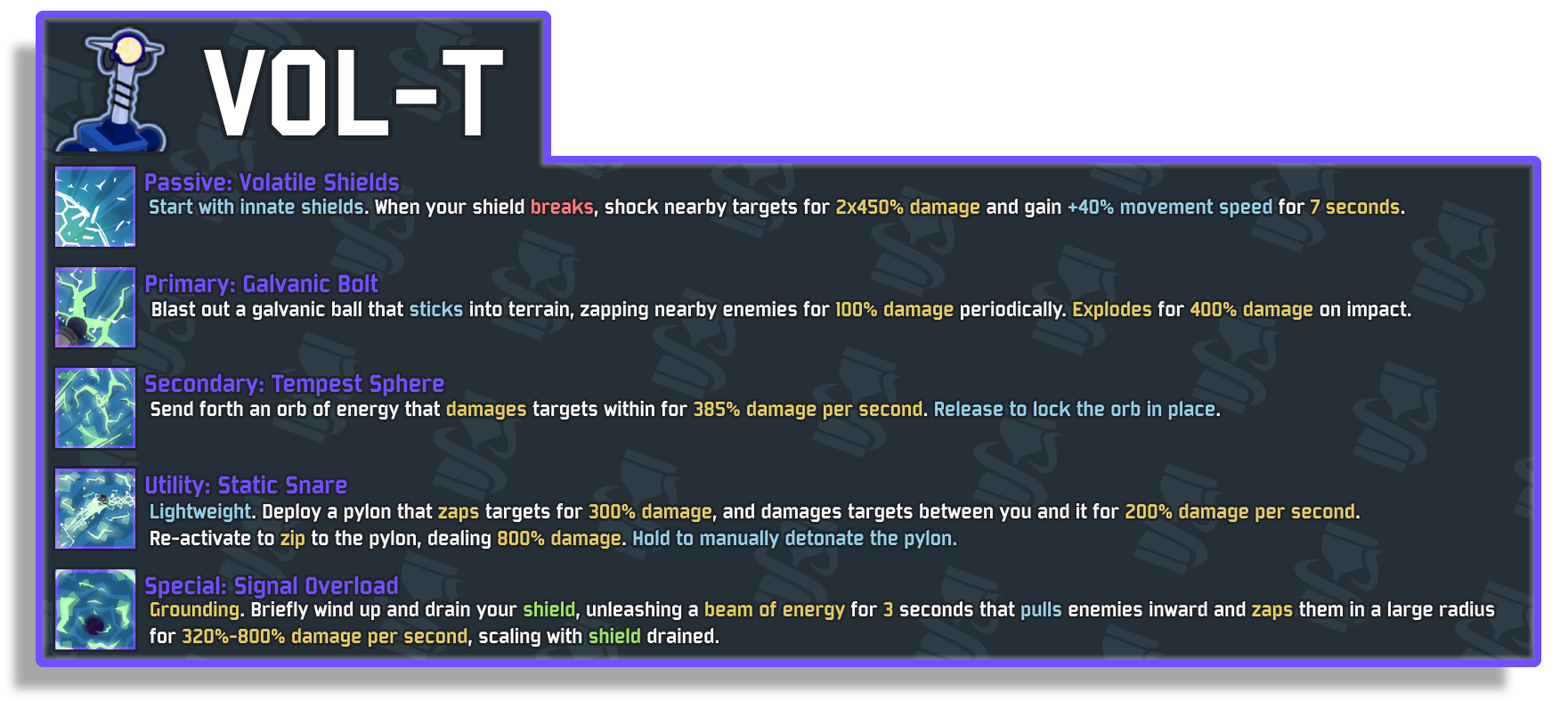
<style>
.page{position:relative;width:1568px;height:701px;background:#252f38}
.page>*{position:absolute;margin:0}
.t1{font:133.6px "Bombardier";color:#ffffff}
.t2{font:26.7px "Bombardier";color:#714fff}
.t3{font:22.3px "Bombardier";color:#f7f7f7}
.t4{font:22.3px "Bombardier";color:#95cde5}
.t5{font:22.3px "Bombardier";color:#fe7c7c}
.t6{font:22.3px "Bombardier";color:#e5c962}
.t7{font:22.3px "Bombardier";color:#9ce562}
</style>
<div class="page">
<p class="t1" style="left:204px;top:50px;width:299px;height:85px">VOL-T</p>
<p class="t2" style="left:145px;top:172px;width:254px;height:19px">Passive: Volatile Shields</p>
<p class="t3" style="left:150px;top:199px;width:1255px;height:18px"><span class="t4">Start with innate shields</span>. When your shield <span class="t5">breaks</span>, shock nearby targets for <span class="t6">2x450% damage </span>and gain <span class="t4">+40% movement speed</span> for <span class="t6">7 seconds</span>.</p>
<p class="t2" style="left:146px;top:273px;width:232px;height:24px">Primary: Galvanic Bolt</p>
<p class="t3" style="left:152px;top:301px;width:1259px;height:20px">Blast out a galvanic ball that <span class="t4">sticks</span> into terrain, zapping nearby enemies for <span class="t6">100% damage</span> periodically. <span class="t6">Explodes</span> for <span class="t6">400% damage</span> on impact.</p>
<p class="t2" style="left:145px;top:373px;width:299px;height:23px">Secondary: Tempest Sphere</p>
<p class="t3" style="left:150px;top:400px;width:1070px;height:19px">Send forth an orb of energy that <span class="t6">damages</span> targets within for <span class="t6">385% damage per second</span>. <span class="t4">Release to lock the orb in place</span>.</p>
<p class="t2" style="left:145px;top:475px;width:202px;height:23px">Utility: Static Snare</p>
<p class="t3" style="left:150px;top:503px;width:1210px;height:46px"><span class="t4">Lightweight</span>. Deploy a pylon that <span class="t6">zaps</span> targets for <span class="t6">300% damage</span>, and damages targets between you and it for <span class="t6">200% damage per second</span>. <br>Re-activate to <span class="t6">zip</span> to the pylon, dealing <span class="t6">800% damage</span>. <span class="t4">Hold to manually detonate the pylon.</span></p>
<p class="t2" style="left:145px;top:575px;width:253px;height:23px">Special: Signal Overload</p>
<p class="t3" style="left:150px;top:601px;width:1345px;height:45px"><span class="t6">Grounding</span>. Briefly wind up and drain your <span class="t7">shield</span>, unleashing a <span class="t6">beam of energy</span> for <span class="t6">3</span> seconds that <span class="t4">pulls</span> enemies inward and <span class="t6">zaps</span> them in a large radius <br>for <span class="t6">320%-800% damage per second</span>, scaling with <span class="t7">shield</span> drained.</p>
</div>
